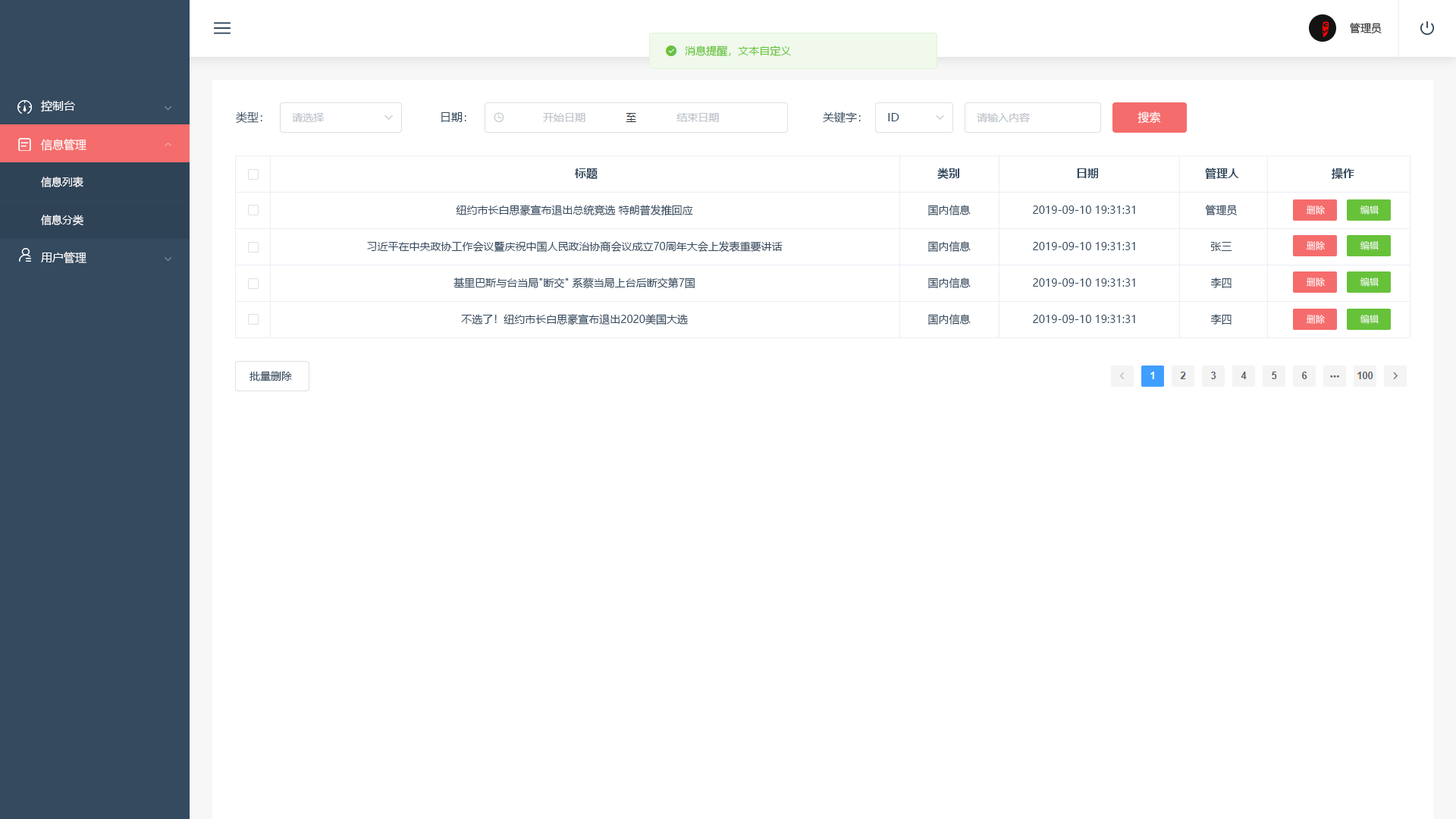
<style>
.page{position:relative;width:1456px;height:819px;background:#ffffff}
.page>*{position:absolute;margin:0}
.t1{font:10.6px "MicrosoftYaHei";color:#252525}
.t2{font:10.6px "MicrosoftYaHei";color:#67c23a}
.t3{font:11.4px "MicrosoftYaHei";color:#ffffff}
.t4{font:11.4px "MicrosoftYaHei";color:#344a5f}
.t5{font:10.6px/37.9px "MicrosoftYaHei";color:#ffffff}
.t6{font:11.4px/37.9px "MicrosoftYaHei";color:#ffffff}
.t7{font:11.4px "MicrosoftYaHei-Bold";color:#344a5f}
.t8{font:10.6px/36.4px "MicrosoftYaHei";color:#344a5f}
.t9{font:9.1px "MicrosoftYaHei";color:#ffffff}
.t10{font:10.6px "MicrosoftYaHei";color:#344a5f}
</style>
<div class="page">
<p class="t1" style="left:1350px;top:23px;width:32px;height:11px">管理员</p>
<p class="t2" style="left:685px;top:45px;width:106px;height:12px">消息提醒，文本自定义</p>
<p class="t3" style="left:41px;top:100px;width:34px;height:12px">控制台</p>
<p class="t4" style="left:236px;top:111px;width:26px;height:12px">类型：</p>
<p class="t4" style="left:441px;top:112px;width:25px;height:10px">日期：</p>
<p class="t4" style="left:823px;top:111px;width:38px;height:12px">关键字：</p>
<p class="t4" style="left:888px;top:113px;width:11px;height:8px">ID</p>
<p class="t3" style="left:1137px;top:111px;width:24px;height:13px">搜索</p>
<p class="t5" style="left:41px;top:139px;width:45px;height:87px"><span class="t6">信息管理<br></span>信息列表<br>信息分类</p>
<p class="t7" style="left:575px;top:168px;width:23px;height:12px">标题</p>
<p class="t7" style="left:937px;top:168px;width:22px;height:11px">类别</p>
<p class="t7" style="left:1077px;top:168px;width:21px;height:11px">日期</p>
<p class="t7" style="left:1205px;top:168px;width:34px;height:11px">管理人</p>
<p class="t7" style="left:1332px;top:168px;width:22px;height:11px">操作</p>
<p class="t8" style="left:367px;top:205px;width:416px;height:120px;text-align:center">纽约市长白思豪宣布退出总统竞选 特朗普发推回应<br>习近平在中央政协工作会议暨庆祝中国人民政治协商会议成立70周年大会上发表重要讲话<br>基里巴斯与台当局"断交" 系蔡当局上台后断交第7国<br>不选了！纽约市长白思豪宣布退出2020美国大选</p>
<p class="t8" style="left:928px;top:205px;width:43px;height:120px">国内信息<br>国内信息<br>国内信息<br>国内信息</p>
<p class="t8" style="left:1033px;top:206px;width:102px;height:117px">2019-09-10 19:31:31<br>2019-09-10 19:31:31<br>2019-09-10 19:31:31<br>2019-09-10 19:31:31</p>
<p class="t8" style="left:1205px;top:205px;width:32px;height:120px;text-align:center">管理员<br>张三<br>李四<br>李四</p>
<p class="t9" style="left:1307px;top:206px;width:18px;height:9px">删除</p>
<p class="t9" style="left:1360px;top:206px;width:19px;height:9px">编辑</p>
<p class="t9" style="left:1307px;top:241px;width:18px;height:9px">删除</p>
<p class="t9" style="left:1360px;top:241px;width:19px;height:9px">编辑</p>
<p class="t3" style="left:41px;top:252px;width:45px;height:11px">用户管理</p>
<p class="t9" style="left:1307px;top:278px;width:18px;height:9px">删除</p>
<p class="t9" style="left:1360px;top:278px;width:19px;height:9px">编辑</p>
<p class="t9" style="left:1307px;top:315px;width:18px;height:9px">删除</p>
<p class="t9" style="left:1360px;top:315px;width:19px;height:9px">编辑</p>
<p class="t10" style="left:249px;top:371px;width:43px;height:10px">批量删除</p>
</div>
